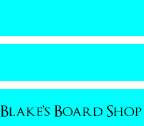
<style>
.page{position:relative;width:144px;height:126px;background:#00ffff}
.page>*{position:absolute;margin:0}
.t1{font:15.5px "OptimusPrincepsSemiBold";letter-spacing:-0.01em;color:#020202}
</style>
<div class="page">
<p class="t1" style="left:0px;top:105px;width:142px;height:12px">Blake’s Board Shop</p>
</div>
